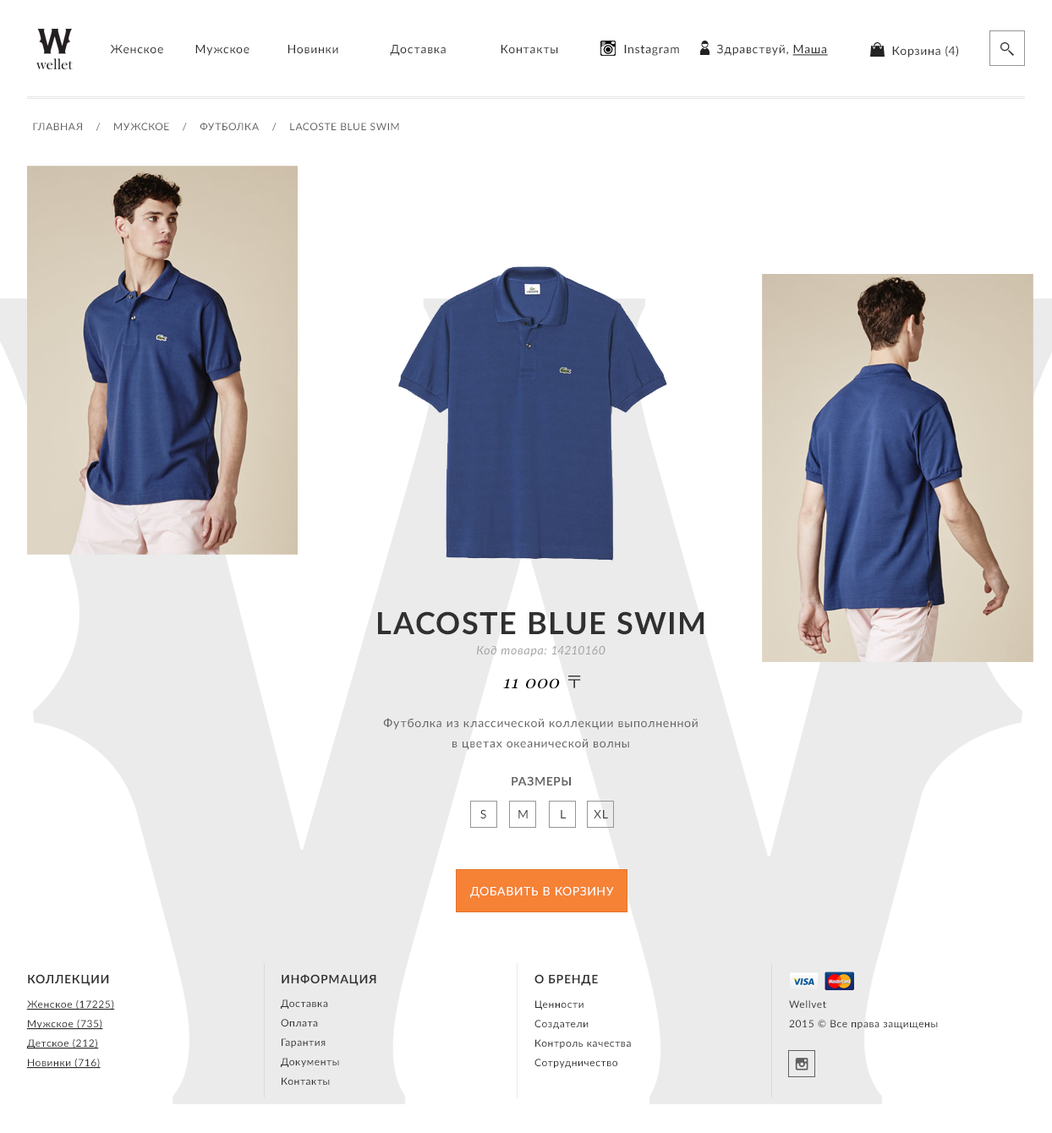
<style>
.page{position:relative;width:1052px;height:1133px;background:#ffffff}
.page>*{position:absolute;margin:0}
.t1{font:11.8px "Lato-Regular";letter-spacing:0.05em;color:#303030}
.t2{font:11.8px "Lato-Regular";letter-spacing:0.05em;color:#303030;text-decoration:underline}
.t3{font:10.1px "Lato-Regular";letter-spacing:0.05em;color:#606060;text-transform:uppercase}
.t4{font:11.8px/20.3px "Lato-Italic";letter-spacing:0.05em;color:#a3a3a3}
.t5{font:30.4px/30.4px "Lato-Bold";letter-spacing:0.05em;color:#303030;text-transform:uppercase}
.t6{font:17.8px "Georgia-Italic";letter-spacing:0.05em;color:#000000}
.t7{font:17.8px "KozGoPr6N-Regular";letter-spacing:0.05em;color:#303030}
.t8{font:11.8px/20.3px "Lato-Regular";letter-spacing:0.05em;color:#606060}
.t9{font:11.8px "Lato-Bold";letter-spacing:0.05em;color:#606060;text-transform:uppercase}
.t10{font:11.8px "Lato-Regular";letter-spacing:0.05em;color:#464542;text-transform:uppercase}
.t11{font:11.8px "Lato-Regular";letter-spacing:0.05em;color:#ffffff;text-transform:uppercase}
.t12{font:11.8px "Lato-Bold";letter-spacing:0.05em;color:#303030;text-transform:uppercase}
.t13{font:10.1px/19.5px "Lato-Regular";letter-spacing:0.05em;color:#303030;text-decoration:underline}
.t14{font:10.1px/19.5px "Lato-Regular";letter-spacing:0.05em;color:#303030}
</style>
<div class="page">
<p class="t1" style="left:110px;top:45px;width:53px;height:8px">Женское</p>
<p class="t1" style="left:195px;top:45px;width:55px;height:11px">Мужское</p>
<p class="t1" style="left:288px;top:45px;width:50px;height:8px">Новинки</p>
<p class="t1" style="left:390px;top:45px;width:56px;height:11px">Доставка</p>
<p class="t1" style="left:501px;top:45px;width:57px;height:8px">Контакты</p>
<p class="t1" style="left:624px;top:45px;width:55px;height:11px">Instagram</p>
<p class="t1" style="left:717px;top:44px;width:111px;height:12px">Здравствуй, <span class="t2">Маша</span></p>
<p class="t1" style="left:892px;top:46px;width:66px;height:12px">Корзина (4)</p>
<p class="t3" style="left:33px;top:123px;width:366px;height:8px">главная    /    мужское    /    футболка    /    lacoste blue swim</p>
<p class="t4" style="left:378px;top:611px;width:326px;height:46px;text-align:center"><span class="t5">lacoste blue swim<br></span>Код товара: 14210160</p>
<p class="t6" style="left:503px;top:676px;width:78px;height:13px">11 000 <span class="t7">〒</span></p>
<p class="t8" style="left:383px;top:718px;width:315px;height:32px;text-align:center">Футболка из классической коллекции выполненной<br>в цветах океанической волны</p>
<p class="t9" style="left:512px;top:776px;width:59px;height:10px">размеры</p>
<p class="t10" style="left:480px;top:809px;width:6px;height:10px">S</p>
<p class="t10" style="left:518px;top:810px;width:10px;height:9px">M</p>
<p class="t10" style="left:561px;top:810px;width:5px;height:9px">L</p>
<p class="t10" style="left:594px;top:810px;width:14px;height:9px">XL</p>
<p class="t11" style="left:470px;top:886px;width:144px;height:12px">добавить в корзину</p>
<p class="t12" style="left:28px;top:974px;width:81px;height:12px">Коллекции</p>
<p class="t12" style="left:282px;top:974px;width:94px;height:12px">информация</p>
<p class="t12" style="left:535px;top:974px;width:63px;height:12px">о бренде</p>
<p class="t13" style="left:26px;top:1000px;width:89px;height:69px">Женское (17225)<br>Мужское (735)<br>Детское (212)<br>Новинки (716)</p>
<p class="t14" style="left:281px;top:1000px;width:58px;height:85px">Доставка<br>Оплата<br>Гарантия<br>Документы<br>Контакты</p>
<p class="t14" style="left:535px;top:1001px;width:96px;height:67px">Ценности<br>Создатели<br>Контроль качества<br>Сотрудничество</p>
<p class="t14" style="left:789px;top:1001px;width:149px;height:28px">Wellvet<br>2015 © Все права защищены</p>
</div>
